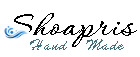
<style>
.page{position:relative;width:140px;height:57px;background:#ffffff}
.page>*{position:absolute;margin:0}
.t1{font:37.7px "Corinthia-Bold";letter-spacing:0.05em;color:#000000}
.t2{font:15px "BrushScriptStd";letter-spacing:0.05em;color:#416e7a}
</style>
<div class="page">
<p class="t1" style="left:5px;top:13px;width:132px;height:34px">Shoapris</p>
<p class="t2" style="left:30px;top:39px;width:94px;height:11px">Hand   Made</p>
</div>
